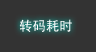
<style>
.page{position:relative;width:96px;height:52px;background:#333333}
.page>*{position:absolute;margin:0}
.t1{font:13.3px "AdobeHeitiStd-Regular";color:#ffffff}
</style>
<div class="page">
<p class="t1" style="left:19px;top:19px;width:53px;height:13px">转码耗时</p>
</div>
